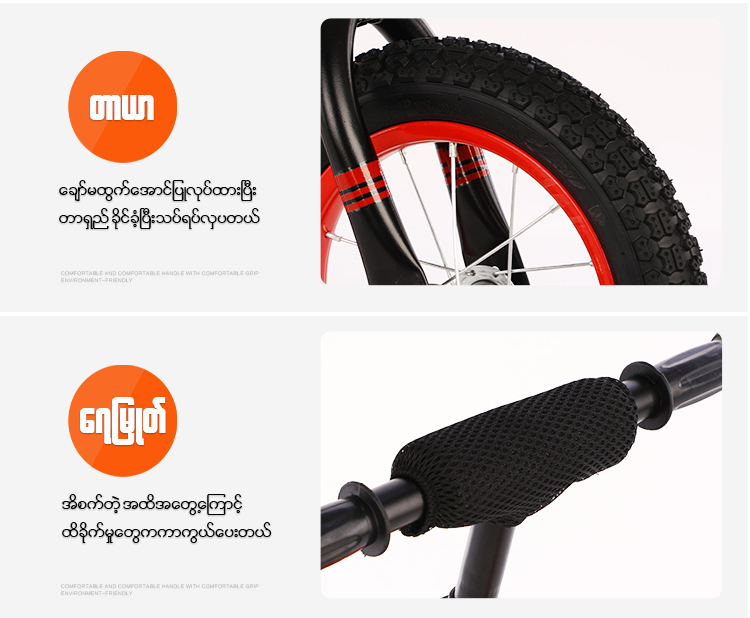
<style>
.page{position:relative;width:750px;height:618px;background:#f4f4f4}
.page>*{position:absolute;margin:0}
.t1{font:48px "W30ArtHouse";color:#fefefe}
.t2{font:23.2px "W01ArtHouseWin";color:#000000}
</style>
<div class="page">
<p class="t1" style="left:90px;top:95px;width:64px;height:25px">wm,m</p>
<p class="t2" style="left:59px;top:180px;width:201px;height:49px">acsmfrxGufatmifjyKvkyfxm;NyD;<br>wm&amp;Snf cdkifcHhNyD;oyf&amp;yfvSyw,f</p>
<p class="t1" style="left:80px;top:397px;width:86px;height:48px">a7jrKwf</p>
<p class="t2" style="left:62px;top:494px;width:210px;height:49px">tdpufwJh txdtawGUaMumifh<br>xdcdkufrIawGuumuG,fay;w,f</p>
</div>
